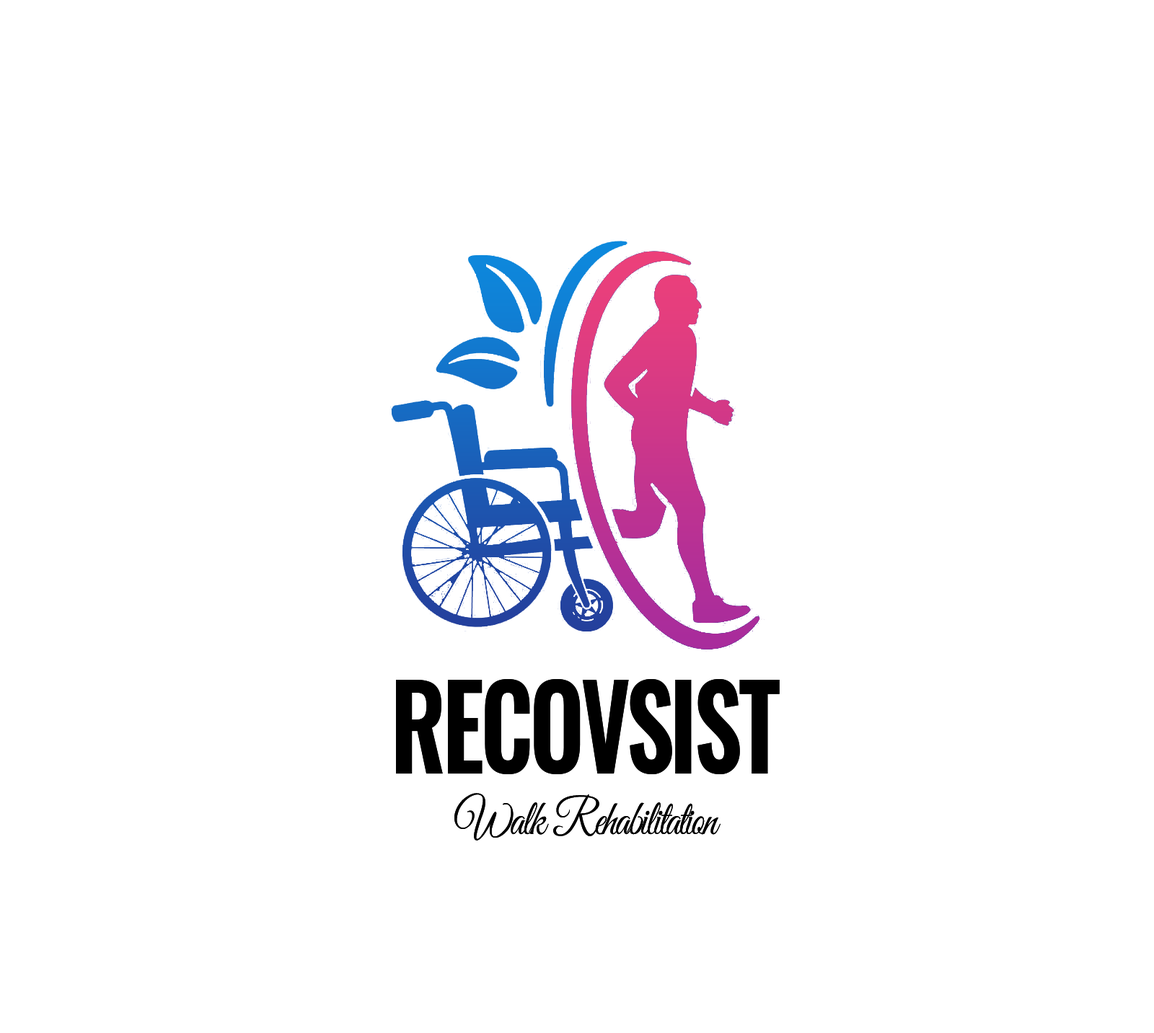
<style>
.page{position:relative;width:1154px;height:1033px;background:#ffffff}
.page>*{position:absolute;margin:0}
.t1{font:115.4px "Oswald-SemiBold";letter-spacing:-0.04em;color:#000000;text-transform:uppercase;scale:0.83 1}
.t2{font:50.5px "GreatVibes-Regular";letter-spacing:-0.04em;color:#000000;scale:0.83 1}
</style>
<div class="page">
<p class="t1" style="left:396px;top:679px;width:384px;height:96px">recovsist</p>
<p class="t2" style="left:454px;top:793px;width:266px;height:48px">Walk Rehabilitation</p>
</div>
